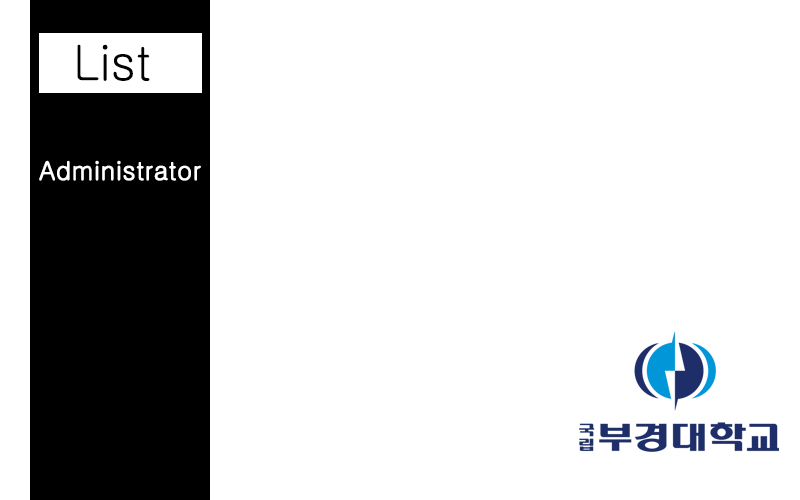
<style>
.page{position:relative;width:800px;height:500px;background:#ffffff}
.page>*{position:absolute;margin:0}
.t1{font:48px "Gulim";color:#010101}
.t2{font:25px "Gulim";color:#ffffff;font-weight:bold}
</style>
<div class="page">
<p class="t1" style="left:77px;top:44px;width:73px;height:37px">List</p>
<p class="t2" style="left:39px;top:160px;width:162px;height:21px">Administrator</p>
</div>
